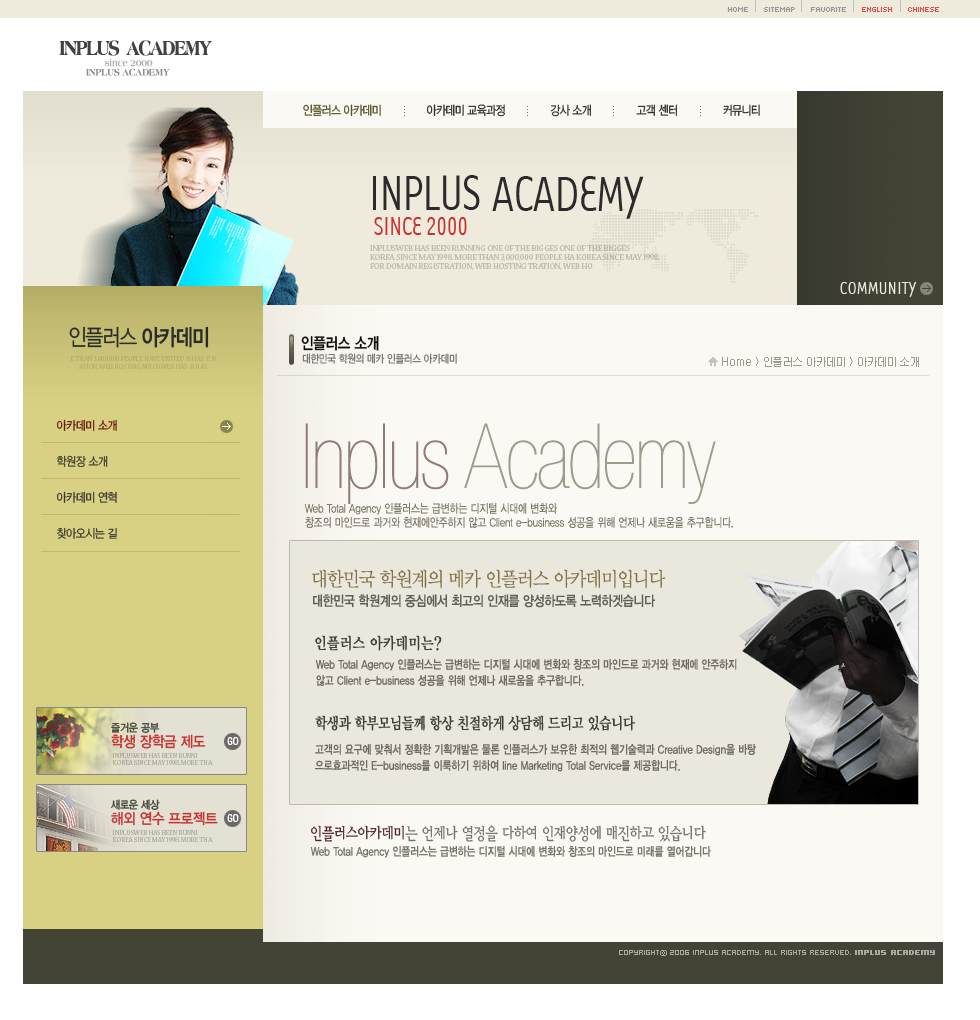
<style>
.page{position:relative;width:980px;height:1020px;background:#fbf9f3}
.page>*{position:absolute;margin:0}
.t1{font:8px "Kroeger0555";color:#999999;text-transform:uppercase}
.t2{font:8px "Kroeger0555";color:#cd5855;text-transform:uppercase}
.t3{font:20.9px "Ameria-ExtraBold";letter-spacing:-0.1em;color:#414141;text-transform:uppercase;scale:0.82 1}
.t4{font:10.2px "Ameria-ExtraBold";letter-spacing:-0.04em;color:#afafaf;scale:0.86 1}
.t5{font:10.2px "Ameria-ExtraBold";letter-spacing:-0.04em;color:#8d8d8d;text-transform:uppercase;scale:0.86 1}
.t6{font:12.6px "YDIYGO320";letter-spacing:-0.05em;color:#2f2f2f;scale:0.86 1}
.t7{font:12.6px "YDIYGO320";letter-spacing:-0.05em;color:#58542b;scale:0.86 1}
.t8{font:57.1px "Tarzana-Narrow";letter-spacing:-0.04em;color:#2b2b2b;text-transform:uppercase;scale:0.9 1}
.t9{font:29.9px "Tarzana-Narrow";letter-spacing:-0.03em;color:#c53333;text-transform:uppercase;scale:0.9 1}
.t10{font:9px/9px "NuevaStd-Regular";color:#bfbcb0;text-transform:uppercase}
.t11{font:20px "Tarzana-Narrow";color:#edeee2;text-transform:uppercase;scale:0.95 1}
.t12{font:23px "YDIYGO320";letter-spacing:-0.06em;color:#2b2b2b;text-transform:uppercase;scale:0.85 1}
.t13{font:23px "YDIYGO340";letter-spacing:-0.06em;color:#2b2b2b;text-transform:uppercase;scale:0.85 1}
.t14{font:16px "YDIYGO330";letter-spacing:-0.02em;color:#0b0b0b;scale:0.85 1}
.t15{font:11px "YDIYGO320";letter-spacing:-0.02em;color:#727171;scale:0.85 1}
.t16{font:7.2px/8px "NuevaStd-Regular";color:#b7b16d;text-transform:uppercase}
.t17{font:11px "YDIWebDotum";color:#9b9c8f;text-transform:uppercase}
.t18{font:11px "YDIWebDotum";color:#9b9c8f}
.t19{font:12px/18px "YDIYGO320";letter-spacing:-0.04em;color:#3c3d30;text-transform:uppercase;scale:0.9 1}
.t20{font:12px/18px "YDIYGO320";letter-spacing:-0.04em;color:#691c10;text-transform:uppercase;scale:0.9 1}
.t21{font:90px "HelveticaNeue-UltraLigCond";letter-spacing:-0.025em}
.t22{font:12px/14px "YDIYGO320";color:#7e7868;scale:0.8 1}
.t23{font:20px "YDIYMjO320";letter-spacing:-0.06em;color:#827249;scale:0.9 1}
.t24{font:14px "YDIYGO330";letter-spacing:-0.025em;color:#615f57;scale:0.85 1}
.t25{font:16px "YDIYMjO340";color:#413f39;scale:0.85 1}
.t26{font:12px/16px "YDIYGO330";color:#6f6b62;scale:0.8 1}
.t27{font:15px/15px "YDIYGO330";letter-spacing:-0.02em;color:#c53333;scale:0.9 1}
.t28{font:11px/15px "YDIYGO330";letter-spacing:-0.02em;color:#49483c;scale:0.9 1}
.t29{font:16px "YDIYMjO340";letter-spacing:-0.04em;color:#413f39;scale:0.82 1}
.t30{font:11px "Univers-Condensed";letter-spacing:-0.08em;color:#ffffff}
.t31{font:7.2px/7px "NuevaStd-Regular";color:#b6b3a9;text-transform:uppercase}
.t32{font:7.2px/7px "NuevaStd-Regular";color:#b6b3aa;text-transform:uppercase}
.t33{font:16px "YDIYMjO230";letter-spacing:-0.025em;color:#726f6f;scale:0.85 1}
.t34{font:16px "YDIYMjO230";letter-spacing:-0.025em;color:#4d2727;scale:0.85 1}
.t35{font:12px "YDIYGO330";color:#78756c;scale:0.8 1}
.t36{font:8px "Hooge0555";color:#aaaaa4}
.t37{font:8px "SandTg";color:#aaaaa4}
.t38{font:8px "Hooge0555";color:#aaaaa4;font-weight:bold}
</style>
<div class="page">
<p class="t1" style="left:727px;top:7px;width:213px;height:5px">Home     Sitemap     Favorite     <span class="t2">ENGLISH     CHINESE</span></p>
<p class="t3" style="left:59px;top:40px;width:154px;height:16px">INPLUS  academy</p>
<p class="t4" style="left:104px;top:58px;width:49px;height:9px">since 2000</p>
<p class="t5" style="left:86px;top:68px;width:84px;height:8px">inplus academy</p>
<p class="t6" style="left:303px;top:104px;width:457px;height:13px"><span class="t7">인플러스 아카데미</span>              아카데미 교육과정              강사 소개              고객 센터              커뮤니티</p>
<p class="t8" style="left:373px;top:175px;width:107px;height:35px">inplus</p>
<p class="t8" style="left:492px;top:176px;width:152px;height:43px">academy</p>
<p class="t9" style="left:374px;top:217px;width:93px;height:18px">since 2000</p>
<p class="t10" style="left:370px;top:245px;width:290px;height:25px">INPLUSWEB has been running one of the bigges one of the bigges<br>Korea since May 1998. More than 3,000,000 people ha Korea since May 1998. <br>for domain registration, web hosting tration, web ho</p>
<p class="t11" style="left:840px;top:281px;width:77px;height:16px">community</p>
<p class="t12" style="left:69px;top:326px;width:140px;height:22px">인플러스<span class="t13"> 아카데미</span></p>
<p class="t14" style="left:301px;top:336px;width:78px;height:15px">인플러스 소개</p>
<p class="t15" style="left:302px;top:353px;width:155px;height:11px">대한민국 학원의 메카 인플러스 아카데미</p>
<p class="t16" style="left:70px;top:356px;width:146px;height:14px;text-align:center">e than 3,000,000 people have visited  B has  e n <br>ation, web hosting,NPLUSWEB has  B has</p>
<p class="t17" style="left:722px;top:357px;width:197px;height:10px"><span class="t18">Home &gt; </span>인플러스 아카데미<span class="t18"> &gt; 아카데미 소개</span></p>
<p class="t19" style="left:56px;top:419px;width:61px;height:120px"><span class="t20">아카데미 소개<br><br></span>학원장 소개<br><br>아카데미 연혁<br><br>찾아오시는 길</p>
<p class="t21" style="left:305px;top:423px;width:411px;height:81px">Inplus Academy</p>
<p class="t22" style="left:304px;top:503px;width:429px;height:25px">Web Total Agency 인플러스는 급변하는 디지털 시대에 변화와<br>창조의 마인드로 과거와 현재에안주하지 않고 Client e-business 성공을 위해 언제나 새로움을 추구합니다.</p>
<p class="t23" style="left:312px;top:569px;width:354px;height:20px">대한민국 학원계의 메카 인플러스 아카데미입니다</p>
<p class="t24" style="left:313px;top:594px;width:342px;height:14px">대한민국 학원계의 중심에서 최고의 인재를 양성하도록 노력하겟습니다</p>
<p class="t25" style="left:315px;top:635px;width:127px;height:16px">인플러스 아카데미는?</p>
<p class="t26" style="left:315px;top:659px;width:422px;height:27px">Web Total Agency 인플러스는 급변하는 디지털 시대에 변화와 창조의 마인드로 과거와 현재에 안주하지<br>않고 Client e-business 성공을 위해 언제나 새로움을 추구합니다.</p>
<p class="t27" style="left:111px;top:722px;width:95px;height:27px"><span class="t28">즐거운 공부<br></span>학생 장학금 제도</p>
<p class="t29" style="left:315px;top:715px;width:321px;height:16px">학생과 학부모님들께 항상 친절하게 상담해 드리고 있습니다</p>
<p class="t30" style="left:227px;top:737px;width:12px;height:8px">GO</p>
<p class="t26" style="left:315px;top:744px;width:441px;height:28px">고객의 요구에 맞춰서 정확한 기획개발은 물론 인플러스가 보유한 최적의 웹기술력과 Creative Design을 바탕<br>으로효과적인 E-business를 이룩하기 위하여 line Marketing Total Service를 제공합니다.</p>
<p class="t31" style="left:112px;top:753px;width:101px;height:12px">INPLUSWEB has been runni<br>Korea since May 1998. More tha</p>
<p class="t27" style="left:111px;top:799px;width:107px;height:27px"><span class="t28">새로운 세상<br></span>해외 연수 프로젝트</p>
<p class="t30" style="left:227px;top:814px;width:12px;height:8px">GO</p>
<p class="t32" style="left:112px;top:830px;width:101px;height:12px">INPLUSWEB has been runni<br>Korea since May 1998. More tha</p>
<p class="t33" style="left:311px;top:825px;width:395px;height:17px"><span class="t34">인플러스아카데미</span>는 언제나 열정을 다하여 인재양성에 매진하고 있습니다</p>
<p class="t35" style="left:310px;top:846px;width:401px;height:12px">Web Total Agency 인플러스는 급변하는 디지털 시대에 변화와 창조의 마인드로 미래를 열어갑니다</p>
<p class="t36" style="left:619px;top:950px;width:316px;height:6px">copyright<span class="t37">ⓒ </span>2006 INPLUS academy. all rights reserved. <span class="t38">INPLUS academy</span></p>
</div>
